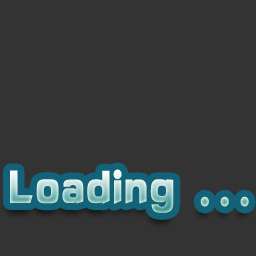
<style>
.page{position:relative;width:256px;height:256px;background:#333333}
.page>*{position:absolute;margin:0}
.t1{font:48px "HYk2gj";scale:0.83 1}
</style>
<div class="page">
<p class="t1" style="left:10px;top:169px;width:239px;height:44px">Loading ...</p>
</div>
